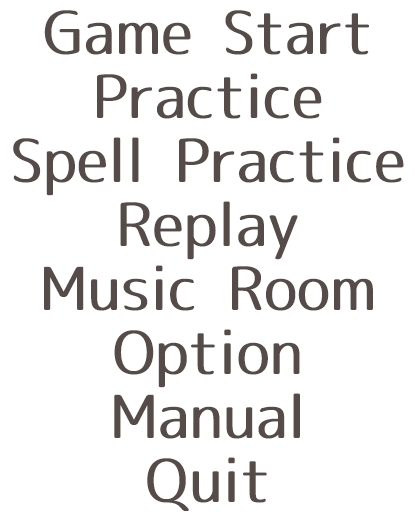
<style>
.page{position:relative;width:415px;height:521px;background:#ffffff}
.page>*{position:absolute;margin:0}
.t1{font:60px "07LogoTypeGothic7";color:#554c4a}
</style>
<div class="page">
<p class="t1" style="left:44px;top:10px;width:325px;height:45px">Game Start</p>
<p class="t1" style="left:97px;top:73px;width:225px;height:46px">Practice</p>
<p class="t1" style="left:13px;top:137px;width:391px;height:59px">Spell Practice</p>
<p class="t1" style="left:120px;top:201px;width:178px;height:59px">Replay</p>
<p class="t1" style="left:44px;top:265px;width:329px;height:46px">Music Room</p>
<p class="t1" style="left:114px;top:329px;width:186px;height:59px">Option</p>
<p class="t1" style="left:114px;top:393px;width:186px;height:46px">Manual</p>
<p class="t1" style="left:147px;top:457px;width:120px;height:54px">Quit</p>
</div>
